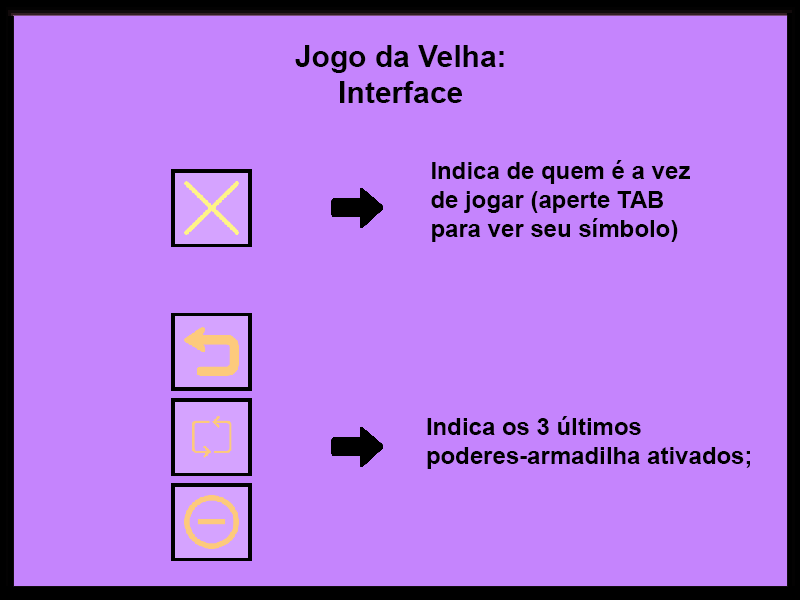
<style>
.page{position:relative;width:800px;height:600px;background:#c584fd}
.page>*{position:absolute;margin:0}
.t1{font:30px "Arial-BoldMT";color:#000000}
.t2{font:24px "Arial-BoldMT";color:#000000}
</style>
<div class="page">
<p class="t1" style="left:295px;top:45px;width:209px;height:58px;text-align:center">Jogo da Velha: <br>Interface</p>
<p class="t2" style="left:431px;top:160px;width:259px;height:82px">Indica de quem é a vez de jogar (aperte TAB para ver seu símbolo)</p>
<p class="t2" style="left:427px;top:416px;width:323px;height:53px">Indica os 3 últimos poderes-armadilha ativados;</p>
</div>
